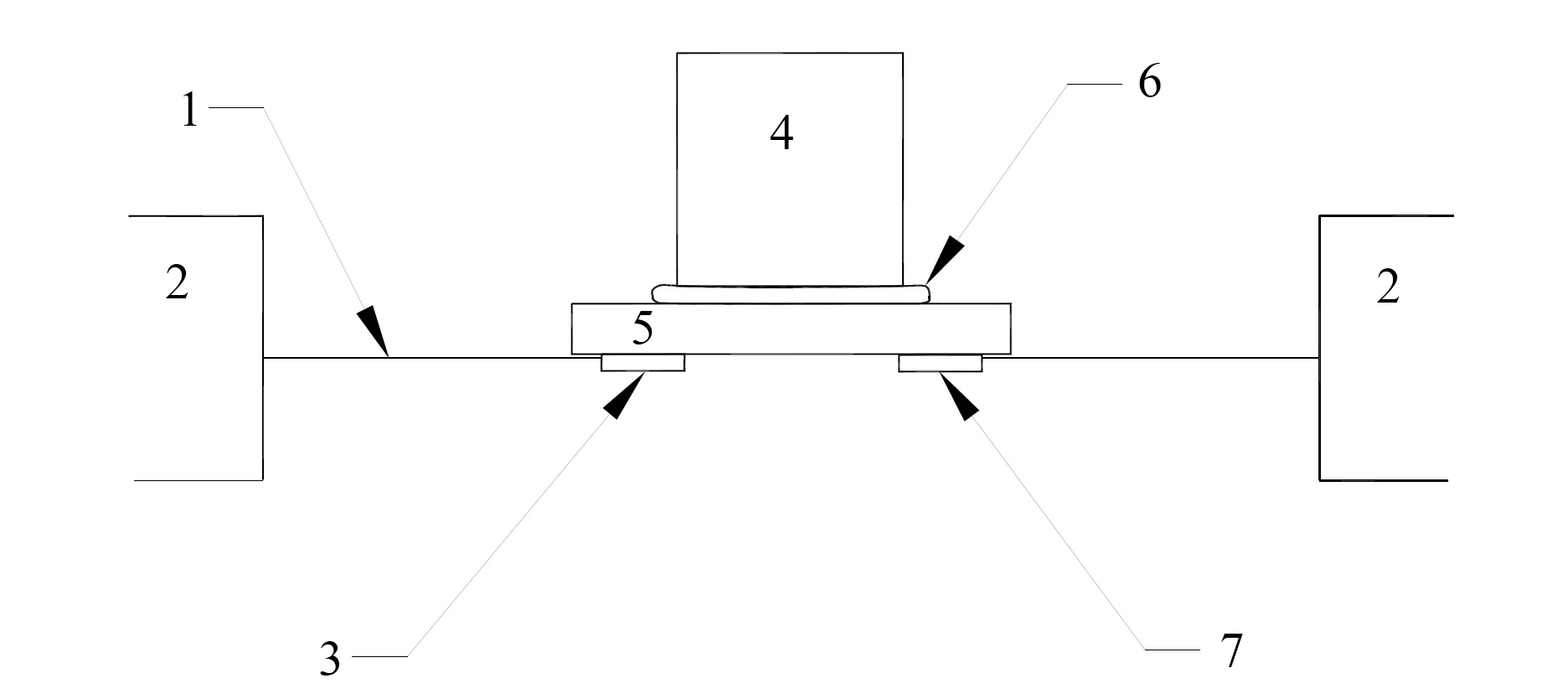
<style>
.page{position:relative;width:1568px;height:699px;background:#ffffff}
.page>*{position:absolute;margin:0}
.t1{font:50.3px "TimesNewRomanPSMT";color:#000000}
</style>
<div class="page">
<p class="t1" style="left:1139px;top:63px;width:22px;height:34px">6</p>
<p class="t1" style="left:183px;top:91px;width:14px;height:35px">1</p>
<p class="t1" style="left:770px;top:115px;width:23px;height:34px">4</p>
<p class="t1" style="left:166px;top:264px;width:22px;height:34px">2</p>
<p class="t1" style="left:1377px;top:268px;width:23px;height:34px">2</p>
<p class="t1" style="left:632px;top:311px;width:20px;height:33px">5</p>
<p class="t1" style="left:320px;top:641px;width:19px;height:34px">3</p>
<p class="t1" style="left:1221px;top:633px;width:22px;height:34px">7</p>
</div>
